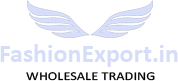
<style>
.page{position:relative;width:178px;height:81px;background:#ffffff}
.page>*{position:absolute;margin:0}
.t1{font:25.9px "Calibri-Bold";color:#d5ddf9}
.t2{font:11.9px "Calibri";color:#000000;text-transform:uppercase;scale:1.21 1}
</style>
<div class="page">
<p class="t1" style="left:0px;top:44px;width:178px;height:23px">FashionExport.in</p>
<p class="t2" style="left:26px;top:72px;width:129px;height:9px">wholesale trading</p>
</div>
